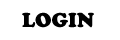
<style>
.page{position:relative;width:120px;height:40px;background:#ffffff}
.page>*{position:absolute;margin:0}
.t1{font:20px "CooperBlackStd";color:#000000}
</style>
<div class="page">
<p class="t1" style="left:22px;top:12px;width:72px;height:16px">LOGIN</p>
</div>
